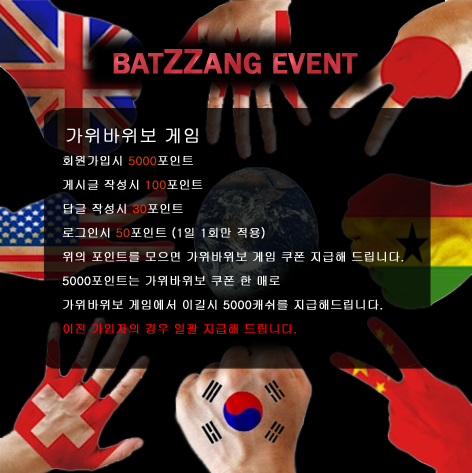
<style>
.page{position:relative;width:472px;height:473px;background:#000000}
.page>*{position:absolute;margin:0}
.t1{font:30px "FranklinGothic-Medium";color:#c63741;font-weight:bold}
.t2{font:36px "FranklinGothic-Medium";color:#c63741;font-weight:bold}
.t3{font:18px "Gulim";color:#ffffff;font-weight:bold}
.t4{font:12px/24px "Gulim";color:#ffffff;font-weight:bold}
.t5{font:12px/24px "Gulim";color:#cc3300;font-weight:bold}
.t6{font:12px/24px "Gulim";color:#ff0000;font-weight:bold}
</style>
<div class="page">
<p class="t1" style="left:113px;top:49px;width:245px;height:25px">BAT<span class="t2">ZZ</span>ANG EVENT</p>
<p class="t3" style="left:66px;top:128px;width:132px;height:16px">가위바위보 게임</p>
<p class="t4" style="left:62px;top:155px;width:342px;height:179px">회원가입시 <span class="t5">5000</span>포인트<br>게시글 작성시 <span class="t5">100</span>포인트<br>답글 작성시 <span class="t5">30</span>포인트<br>로그인시 <span class="t5">50</span>포인트 (1일 1회만 적용)<br>위의 포인트를 모으면 가위바위보 게임 쿠폰 지급해 드립니다. <br>5000포인트는 가위바위보 쿠폰 한 매로 <br>가위바위보 게임에서 이길시 5000캐쉬를 지급해드립니다.<br><span class="t6">이전 가입자의 경우 일괄 지급해 드립니다.</span></p>
</div>
